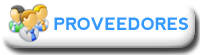
<style>
.page{position:relative;width:200px;height:55px;background:#ffffff}
.page>*{position:absolute;margin:0}
.t1{font:17px "nevis-Bold";color:#3399ff}
</style>
<div class="page">
<p class="t1" style="left:54px;top:17px;width:134px;height:13px">PROVEEDORES</p>
</div>
